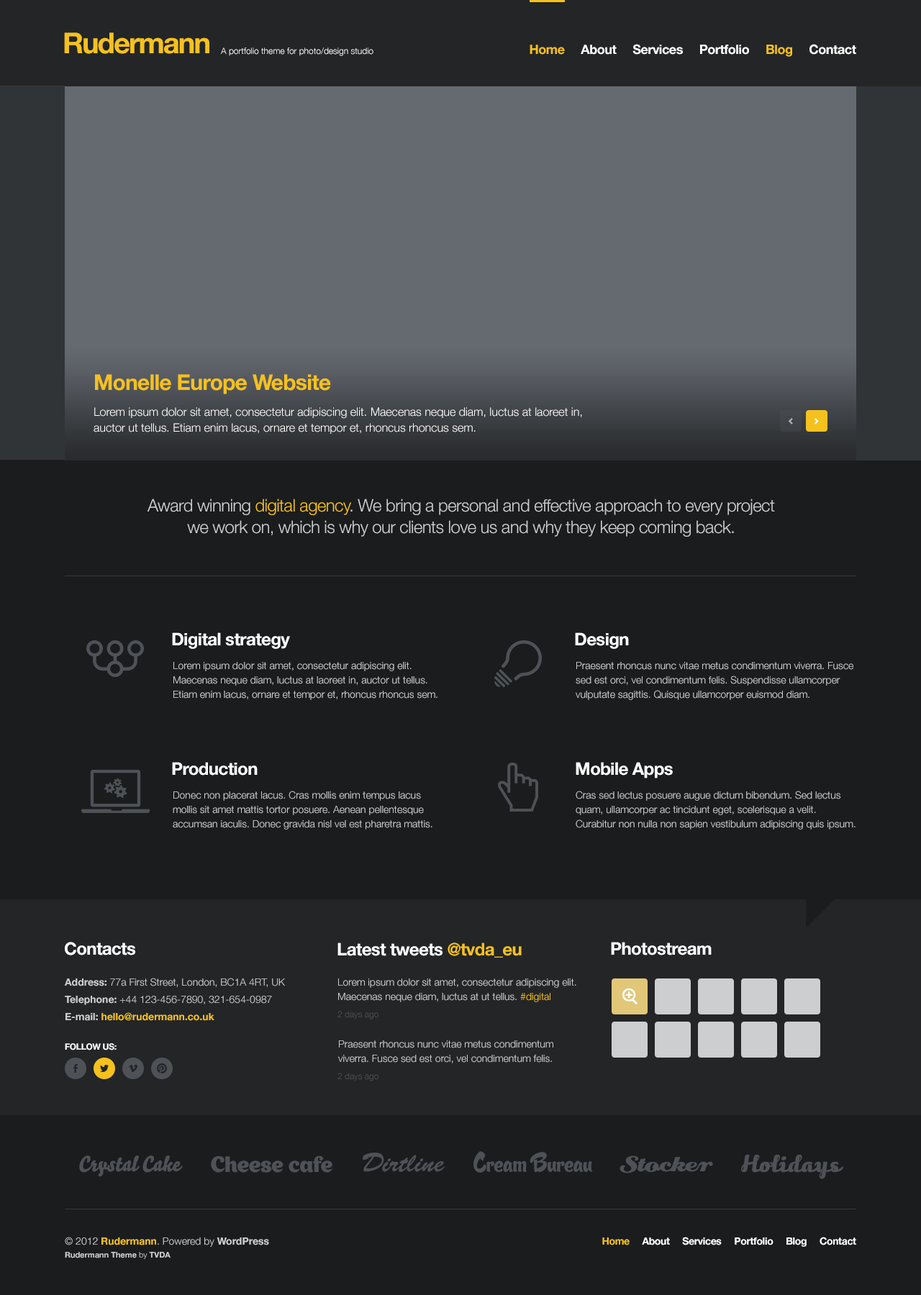
<style>
.page{position:relative;width:921px;height:1295px;background:#1a1c1e}
.page>*{position:absolute;margin:0}
.t1{font:28.8px "HelveticaNeue-Bold";letter-spacing:-0.05em;color:#f5c11e}
.t2{font:8.6px "HelveticaNeue-Light";color:#ffffff}
.t3{font:12.9px "HelveticaNeue-Bold";letter-spacing:-0.025em;color:#ffffff}
.t4{font:12.9px "HelveticaNeue-Bold";letter-spacing:-0.025em;color:#f5c11e}
.t5{font:21.6px "HelveticaNeue-Bold";letter-spacing:-0.025em;color:#f5c11e}
.t6{font:11.5px/15.8px "HelveticaNeue-Light";color:#ffffff}
.t7{font:17.3px/21.6px "HelveticaNeue-Light";letter-spacing:-0.025em;color:#ccced0}
.t8{font:17.3px/21.6px "HelveticaNeue-Light";letter-spacing:-0.025em;color:#f5c11e}
.t9{font:17.3px "HelveticaNeue-Bold";letter-spacing:-0.025em;color:#ffffff}
.t10{font:10.1px/14.4px "HelveticaNeue-Light";color:#ccced0}
.t11{font:17.3px "HelveticaNeue-Bold";letter-spacing:-0.025em;color:#f5c11e}
.t12{font:10.1px/17.3px "HelveticaNeue-Light";color:#ccced0}
.t13{font:10.1px/17.3px "HelveticaNeue-Bold";color:#ccced0}
.t14{font:10.1px/17.3px "HelveticaNeue-Bold";color:#f5c11e}
.t15{font:10.1px/14.4px "HelveticaNeue-Light";color:#f5c11e}
.t16{font:8.6px "HelveticaNeue-Light";color:#4e5257}
.t17{font:8.6px "HelveticaNeue-Bold";letter-spacing:-0.025em;color:#ffffff;text-transform:uppercase}
.t18{font:7.9px/12.9px "HelveticaNeue-Bold";color:#ccced0}
.t19{font:10.1px/12.9px "HelveticaNeue-Light";color:#ccced0}
.t20{font:10.1px/12.9px "HelveticaNeue-Bold";color:#f5c11e}
.t21{font:10.1px/12.9px "HelveticaNeue-Bold";color:#ccced0}
.t22{font:7.9px/12.9px "HelveticaNeue-Light";color:#ccced0}
.t23{font:10.1px "HelveticaNeue-Bold";letter-spacing:-0.025em;color:#ffffff}
.t24{font:10.1px "HelveticaNeue-Bold";letter-spacing:-0.025em;color:#f5c11e}
</style>
<div class="page">
<p class="t1" style="left:64px;top:32px;width:145px;height:22px">Rudermann</p>
<p class="t2" style="left:221px;top:47px;width:152px;height:9px">A portfolio theme for photo/design studio</p>
<p class="t3" style="left:529px;top:44px;width:327px;height:13px"><span class="t4">Home</span>     About     Services     Portfolio     <span class="t4">Blog</span>     Contact</p>
<p class="t5" style="left:95px;top:374px;width:236px;height:20px">Monelle Europe Website</p>
<p class="t6" style="left:94px;top:407px;width:488px;height:27px">Lorem ipsum dolor sit amet, consectetur adipiscing elit. Maecenas neque diam, luctus at laoreet in,<br>auctor ut tellus. Etiam enim lacus, ornare et tempor et, rhoncus rhoncus sem.</p>
<p class="t7" style="left:147px;top:499px;width:628px;height:38px;text-align:center">Award winning <span class="t8">digital agency</span>. We bring a personal and effective approach to every project<br>we work on, which is why our clients love us and why they keep coming back.</p>
<p class="t9" style="left:172px;top:632px;width:118px;height:17px">Digital strategy</p>
<p class="t9" style="left:575px;top:632px;width:54px;height:17px">Design</p>
<p class="t10" style="left:173px;top:662px;width:264px;height:38px">Lorem ipsum dolor sit amet, consectetur adipiscing elit.<br>Maecenas neque diam, luctus at laoreet in, auctor ut tellus.<br>Etiam enim lacus, ornare et tempor et, rhoncus rhoncus sem.</p>
<p class="t10" style="left:576px;top:662px;width:277px;height:38px">Praesent rhoncus nunc vitae metus condimentum viverra. Fusce<br>sed est orci, vel condimentum felis. Suspendisse ullamcorper<br>vulputate sagittis. Quisque ullamcorper euismod diam.</p>
<p class="t9" style="left:172px;top:762px;width:86px;height:14px">Production</p>
<p class="t9" style="left:576px;top:762px;width:97px;height:16px">Mobile Apps</p>
<p class="t10" style="left:173px;top:791px;width:259px;height:38px">Donec non placerat lacus. Cras mollis enim tempus lacus<br>mollis sit amet mattis tortor posuere. Aenean pellentesque<br>accumsan iaculis. Donec gravida nisl vel est pharetra mattis.</p>
<p class="t10" style="left:576px;top:791px;width:279px;height:38px">Cras sed lectus posuere augue dictum bibendum. Sed lectus<br>quam, ullamcorper ac tincidunt eget, scelerisque a velit.<br>Curabitur non nulla non sapien vestibulum adipiscing quis ipsum.</p>
<p class="t9" style="left:65px;top:942px;width:70px;height:13px">Contacts</p>
<p class="t9" style="left:611px;top:942px;width:100px;height:13px">Photostream</p>
<p class="t9" style="left:337px;top:942px;width:185px;height:16px">Latest tweets <span class="t11">@tvda_eu</span></p>
<p class="t12" style="left:65px;top:978px;width:220px;height:43px"><span class="t13">Address:</span> 77a First Street, London, BC1A 4RT, UK<br><span class="t13">Telephone:</span> +44 123-456-7890, 321-654-0987<br><span class="t13">E-mail: </span><span class="t14">hello@rudermann.co.uk</span></p>
<p class="t10" style="left:338px;top:978px;width:238px;height:24px">Lorem ipsum dolor sit amet, consectetur adipiscing elit.<br>Maecenas neque diam, luctus at ut tellus. <span class="t15">#digital</span></p>
<p class="t16" style="left:337px;top:1011px;width:41px;height:8px">2 days ago</p>
<p class="t17" style="left:65px;top:1043px;width:52px;height:7px">Follow Us:</p>
<p class="t10" style="left:338px;top:1040px;width:215px;height:23px">Praesent rhoncus nunc vitae metus condimentum<br>viverra. Fusce sed est orci, vel condimentum felis.</p>
<p class="t16" style="left:337px;top:1073px;width:41px;height:8px">2 days ago</p>
<p class="t18" style="left:65px;top:1237px;width:204px;height:22px"><span class="t19">© 2012 </span><span class="t20">Rudermann</span><span class="t19">. Powered by </span><span class="t21">WordPress<br></span>Rudermann Theme<span class="t22"> by </span>TVDA</p>
<p class="t23" style="left:602px;top:1237px;width:254px;height:10px"><span class="t24">Home</span>     About     Services     Portfolio     Blog     Contact</p>
</div>
